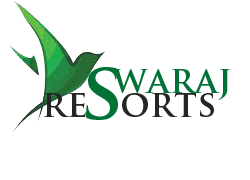
<style>
.page{position:relative;width:250px;height:180px;background:#ffffff}
.page>*{position:absolute;margin:0}
.t1{font:80px "TrajanPro-Bold";color:#007236}
.t2{font:36px "TrajanPro-Bold";color:#007236}
.t3{font:36px "TrajanPro-Bold";color:#252525}
</style>
<div class="page">
<p class="t1" style="left:86px;top:67px;width:32px;height:53px">s</p>
<p class="t2" style="left:112px;top:69px;width:118px;height:31px">waraj</p>
<p class="t3" style="left:43px;top:92px;width:171px;height:25px">re   orts</p>
</div>
